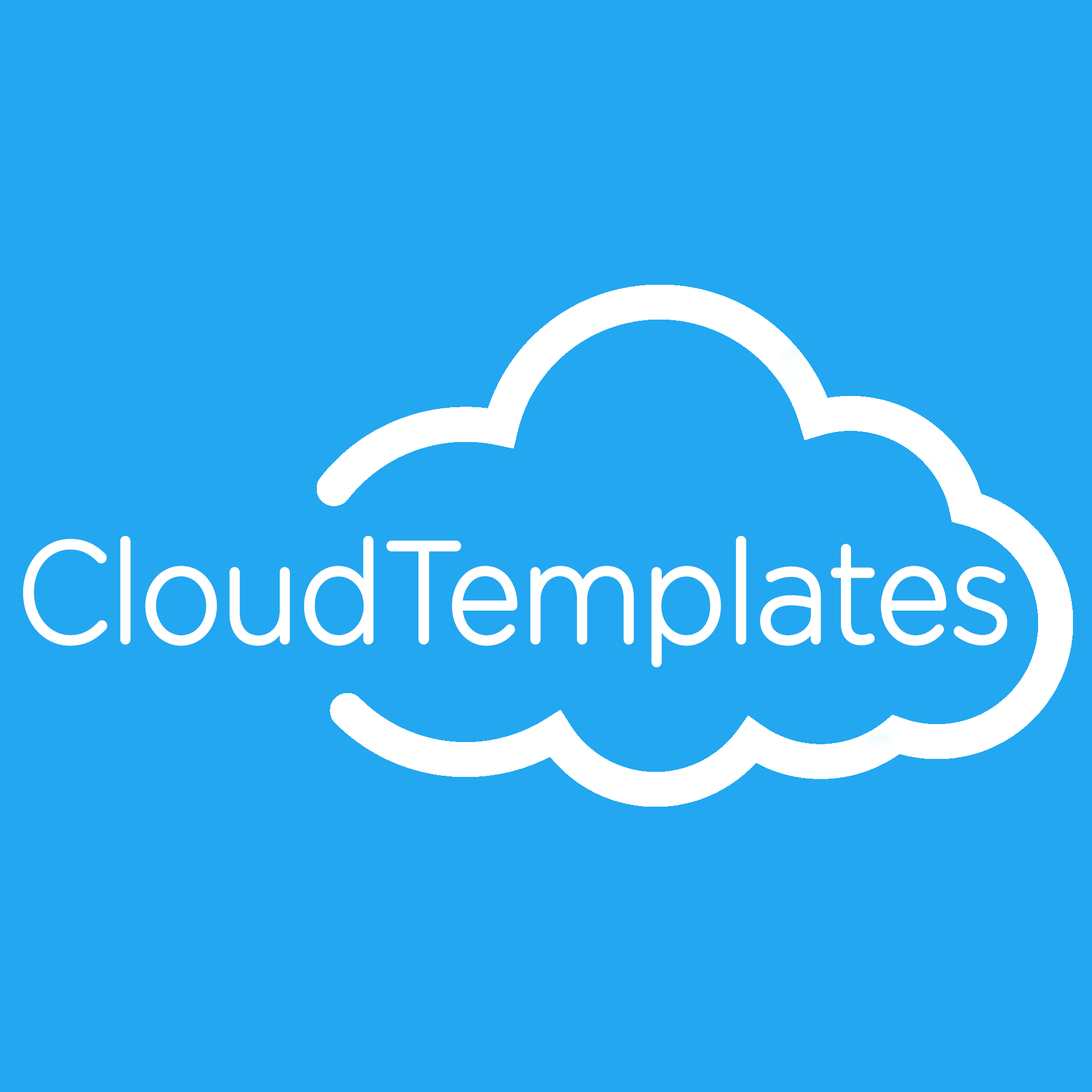
<style>
.page{position:relative;width:1092px;height:1092px;background:#23a7f0}
.page>*{position:absolute;margin:0}
.t1{font:142.1px "GothamRounded-Light";letter-spacing:-0.04em;color:#ffffff;font-weight:bold;scale:0.91 1}
</style>
<div class="page">
<p class="t1" style="left:23px;top:536px;width:984px;height:131px">CloudTemplates</p>
</div>
